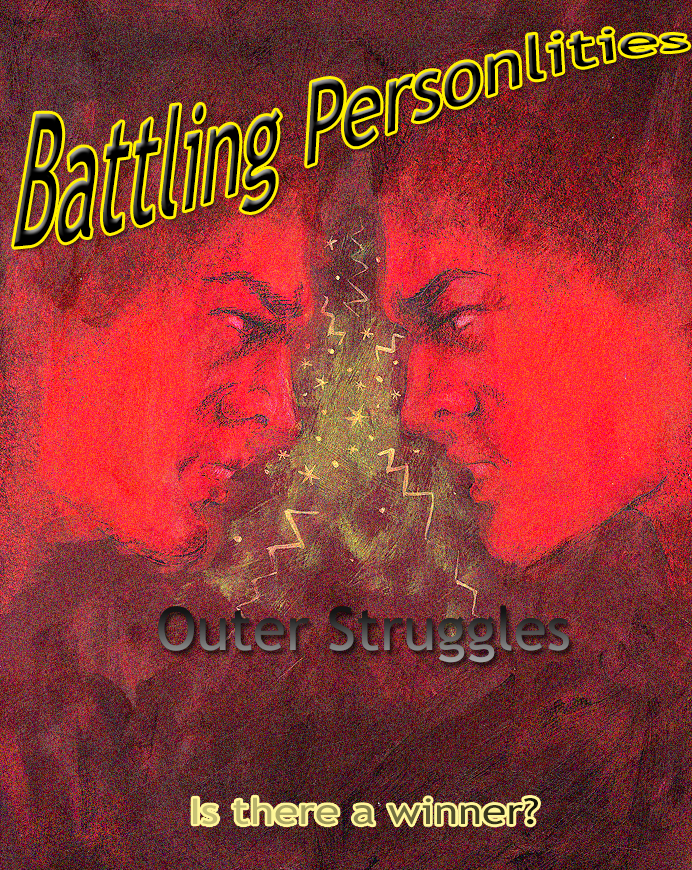
<style>
.page{position:relative;width:692px;height:870px}
.page>*{position:absolute;margin:0}
.t1{font:102.9px "TrebuchetMS";color:#000000;scale:0.73 1}
.t2{font:60px "TrebuchetMS"}
</style>
<div class="page">
<p class="t1" style="left:14px;top:29px;width:675px;height:218px">Battling Personlities</p>
<p class="t2" style="left:158px;top:605px;width:412px;height:58px">Outer Struggles</p>
</div>
